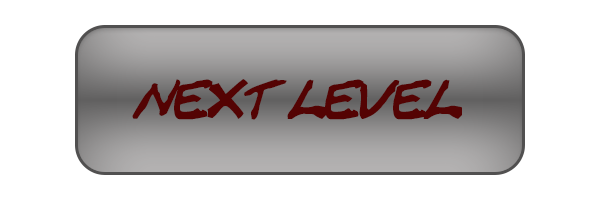
<style>
.page{position:relative;width:600px;height:200px;background:#ffffff}
.page>*{position:absolute;margin:0}
.t1{font:40px "CrackedJohnnie";letter-spacing:-0.09em;color:#540303;text-transform:uppercase;font-style:italic}
</style>
<div class="page">
<p class="t1" style="left:132px;top:79px;width:330px;height:41px">Next Level</p>
</div>
